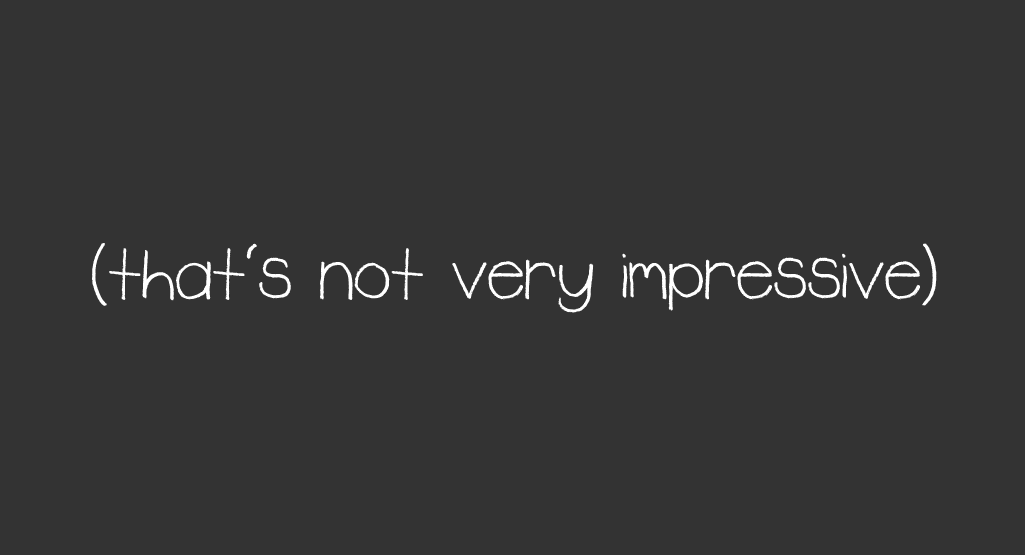
<style>
.page{position:relative;width:1025px;height:555px;background:#333333}
.page>*{position:absolute;margin:0}
.t1{font:83.3px "Rudiment";color:#ffffff}
</style>
<div class="page">
<p class="t1" style="left:92px;top:243px;width:845px;height:70px">(that's not very impressive)</p>
</div>
